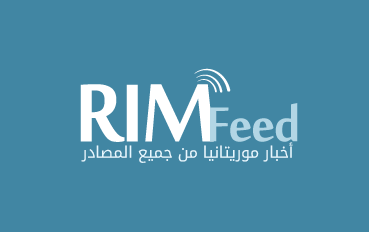
<style>
.page{position:relative;width:369px;height:232px;background:#4186a3}
.page>*{position:absolute;margin:0}
.t1{font:22.4px "MyriadArabic-Regular";letter-spacing:-0.005em;color:#ffffff;scale:0.88 1}
.t2{font:125.8px "MoolBoran";letter-spacing:-0.025em;color:#ffffff}
.t3{font:74.9px "MoolBoran";letter-spacing:-0.025em;color:#b2d6e5}
.t4{font:16px "DroidArabicKufi";letter-spacing:-0.005em;color:#e7f8ff}
</style>
<div class="page">
<p class="t1" style="left:194px;top:68px;width:37px;height:24px;rotate:24deg">ـــــ</p>
<p class="t2" style="left:80px;top:84px;width:134px;height:58px">RIM</p>
<p class="t3" style="left:210px;top:103px;width:88px;height:39px">Feed</p>
<p class="t4" style="left:81px;top:142px;width:212px;height:21px">أخبار موريتانيا من جميع المصادر</p>
</div>
